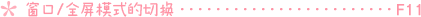
<style>
.page{position:relative;width:421px;height:17px;background:#ffffff}
.page>*{position:absolute;margin:0}
.t1{font:18px "¢è?";color:#ff93a5}
</style>
<div class="page">
<p class="t1" style="left:26px;top:1px;width:148px;height:16px">窗口/全屏模式的切换</p>
</div>
